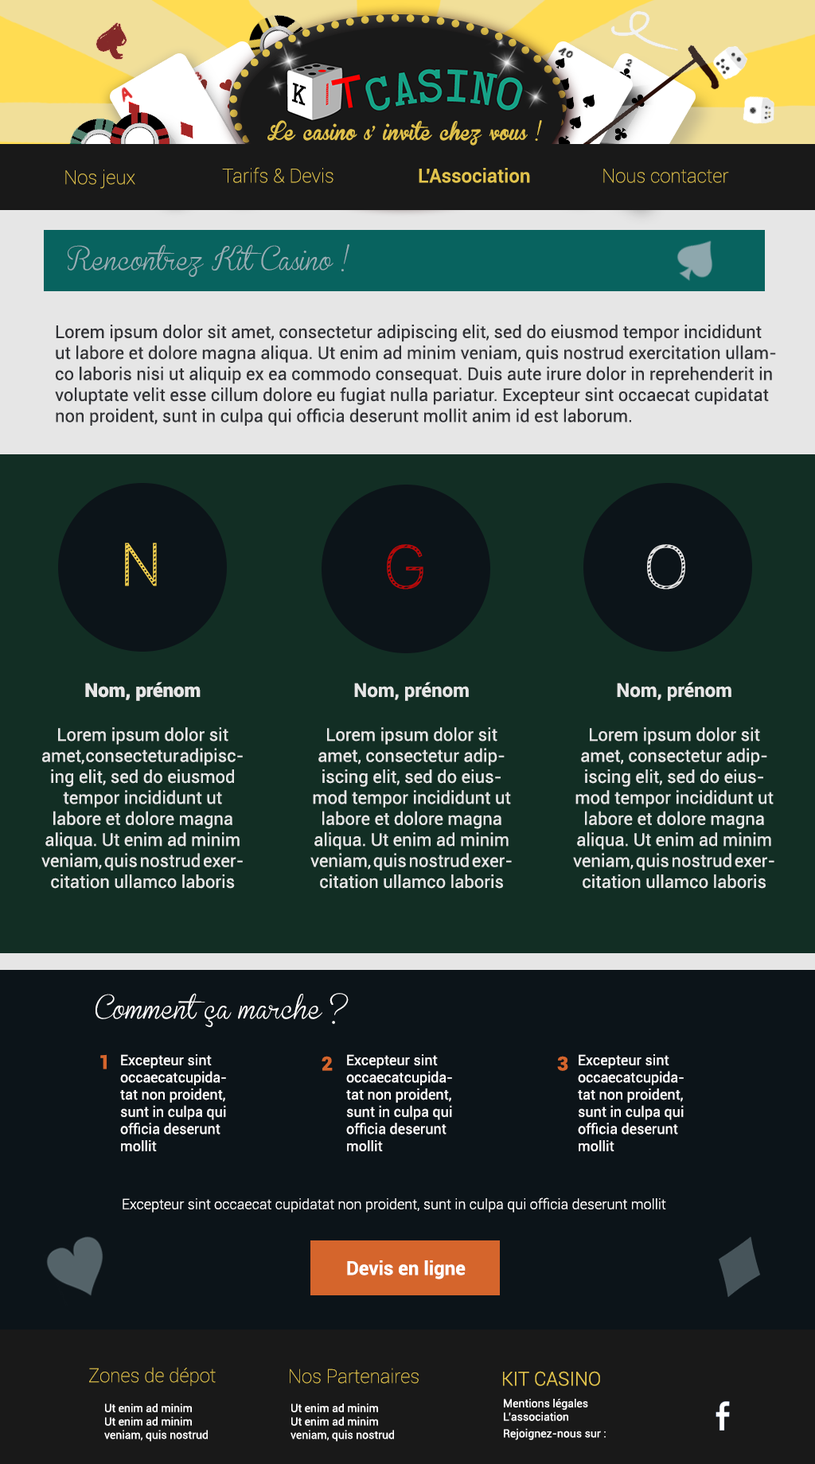
<style>
.page{position:relative;width:815px;height:1464px;background:#0c1419}
.page>*{position:absolute;margin:0}
.t1{font:17.5px "BrannbollFet";color:#e0c14b}
.t2{font:19.1px "Roboto-Thin";color:#e1c34c}
.t3{font:19.1px "Roboto-Medium";color:#e1c34c}
.t4{font:23.9px "BrannbollSmal";color:#99afb6}
.t5{font:17.5px "Roboto-Regular";color:#313236}
.t6{font:57.3px "Lane-Cane";color:#f6d34f}
.t7{font:57.3px "Lane-Cane";color:#b80808}
.t8{font:57.3px "Lane-Cane";color:#e6e6e6}
.t9{font:17.5px "Roboto-Regular";color:#e6e6e6}
.t10{font:19.1px "Roboto-Black";color:#e6e6e6}
.t11{font:19.1px "Roboto-Bold";color:#e6e6e6}
.t12{font:23.9px "BrannbollSmal";color:#ffffff}
.t13{font:19.1px "Roboto-Black";color:#d5652c}
.t14{font:14.3px "Roboto-Regular";color:#fffefe}
.t15{font:14.3px "Roboto-Light";color:#fffefe}
.t16{font:19.1px "Roboto-Bold";color:#ffffff}
.t17{font:19.1px "Roboto-Light";color:#e1c34c}
.t18{font:11.1px "Roboto-Regular";color:#ffffff}
.t19{font:11.1px/16.7px "Roboto-Regular";color:#ffffff}
</style>
<div class="page">
<p class="t1" style="left:267px;top:120px;width:275px;height:26px">Le casino s' invite chez vous !</p>
<p class="t2" style="left:65px;top:169px;width:70px;height:20px">Nos jeux</p>
<p class="t2" style="left:222px;top:167px;width:111px;height:16px">Tarifs &amp; Devis</p>
<p class="t3" style="left:418px;top:168px;width:112px;height:15px">L'Association</p>
<p class="t2" style="left:603px;top:169px;width:126px;height:14px">Nous contacter</p>
<p class="t4" style="left:68px;top:244px;width:281px;height:33px">Rencontrez Kit Casino !</p>
<p class="t5" style="left:55px;top:325px;width:721px;height:101px">Lorem ipsum dolor sit amet, consectetur adipiscing elit, sed do eiusmod tempor incididunt ut labore et dolore magna aliqua. Ut enim ad minim veniam, quis nostrud exercitation ullamco laboris nisi ut aliquip ex ea commodo consequat. Duis aute irure dolor in reprehenderit in voluptate velit esse cillum dolore eu fugiat nulla pariatur. Excepteur sint occaecat cupidatat non proident, sunt in culpa qui officia deserunt mollit anim id est laborum.</p>
<p class="t6" style="left:125px;top:543px;width:32px;height:43px">N</p>
<p class="t7" style="left:387px;top:544px;width:36px;height:45px">G</p>
<p class="t8" style="left:647px;top:544px;width:38px;height:45px">O</p>
<p class="t9" style="left:41px;top:682px;width:202px;height:207px;text-align:center"><span class="t10">Nom, prénom<br><br></span>Lorem ipsum dolor sit amet, consectetur adipiscing elit, sed do eiusmod tempor incididunt ut labore et dolore magna aliqua. Ut enim ad minim veniam, quis nostrud exercitation ullamco laboris</p>
<p class="t9" style="left:310px;top:682px;width:202px;height:207px;text-align:center"><span class="t11">Nom, prénom<br><br></span>Lorem ipsum dolor sit amet, consectetur adipiscing elit, sed do eiusmod tempor incididunt ut labore et dolore magna aliqua. Ut enim ad minim veniam, quis nostrud exercitation ullamco laboris</p>
<p class="t9" style="left:573px;top:682px;width:201px;height:207px;text-align:center"><span class="t11">Nom, prénom<br><br></span>Lorem ipsum dolor sit amet, consectetur adipiscing elit, sed do eiusmod tempor incididunt ut labore et dolore magna aliqua. Ut enim ad minim veniam, quis nostrud exercitation ullamco laboris</p>
<p class="t12" style="left:95px;top:993px;width:253px;height:34px">Comment ça marche ?</p>
<p class="t13" style="left:100px;top:1054px;width:7px;height:15px">1</p>
<p class="t14" style="left:120px;top:1054px;width:106px;height:97px">Excepteur sint occaecat cupidatat non proident, sunt in culpa qui officia deserunt mollit</p>
<p class="t13" style="left:321px;top:1056px;width:12px;height:15px">2</p>
<p class="t14" style="left:346px;top:1054px;width:106px;height:97px">Excepteur sint occaecat cupidatat non proident, sunt in culpa qui officia deserunt mollit</p>
<p class="t13" style="left:557px;top:1056px;width:11px;height:15px">3</p>
<p class="t14" style="left:578px;top:1054px;width:105px;height:97px">Excepteur sint occaecat cupidatat non proident, sunt in culpa qui officia deserunt mollit</p>
<p class="t15" style="left:123px;top:1197px;width:543px;height:15px">Excepteur sint occaecat cupidatat non proident, sunt in culpa qui officia deserunt mollit</p>
<p class="t16" style="left:347px;top:1260px;width:118px;height:19px">Devis en ligne</p>
<p class="t2" style="left:89px;top:1367px;width:127px;height:19px">Zones de dépot</p>
<p class="t2" style="left:290px;top:1368px;width:128px;height:15px">Nos Partenaires</p>
<p class="t17" style="left:503px;top:1371px;width:97px;height:15px">KIT CASINO</p>
<p class="t18" style="left:104px;top:1403px;width:104px;height:39px">Ut enim ad minim <br>Ut enim ad minim <br>veniam, quis nostrud</p>
<p class="t18" style="left:290px;top:1403px;width:104px;height:39px">Ut enim ad minim <br>Ut enim ad minim <br>veniam, quis nostrud</p>
<p class="t18" style="left:504px;top:1399px;width:101px;height:41px">Mentions légales<br>L’association<br><span class="t19">Rejoignez-nous sur :</span></p>
</div>
